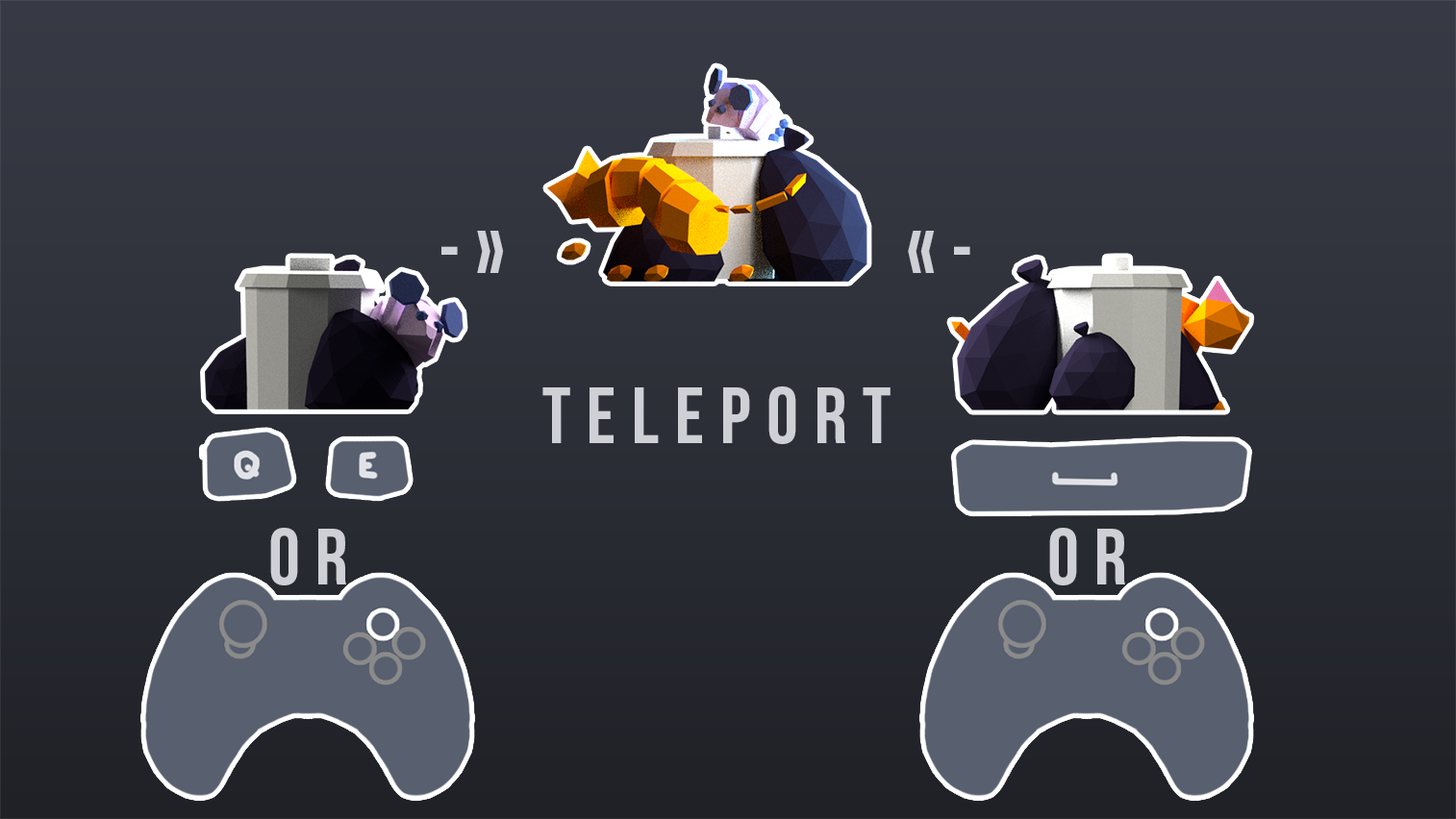
<style>
.page{position:relative;width:1456px;height:819px}
.page>*{position:absolute;margin:0}
.t1{font:79.8px "BebasNeueBold";letter-spacing:0.2em;color:#ced0d5}
</style>
<div class="page">
<p class="t1" style="left:441px;top:231px;width:63px;height:42px">-»</p>
<p class="t1" style="left:908px;top:231px;width:62px;height:42px">«-</p>
<p class="t1" style="left:542px;top:387px;width:348px;height:57px">Teleport</p>
<p class="t1" style="left:270px;top:528px;width:76px;height:58px">OR</p>
<p class="t1" style="left:1049px;top:528px;width:76px;height:58px">OR</p>
</div>
